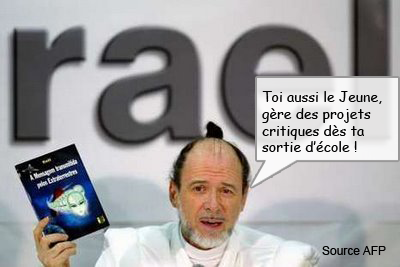
<style>
.page{position:relative;width:400px;height:267px}
.page>*{position:absolute;margin:0}
.t1{font:14px "ComicSansMS";color:#000000}
.t2{font:12px "ArialMT";color:#000000}
</style>
<div class="page">
<p class="t1" style="left:262px;top:91px;width:120px;height:61px">Toi aussi le Jeune, <br>gère des projets<br>critiques dès ta <br>sortie d’école !</p>
<p class="t2" style="left:322px;top:246px;width:64px;height:9px">Source AFP</p>
</div>
